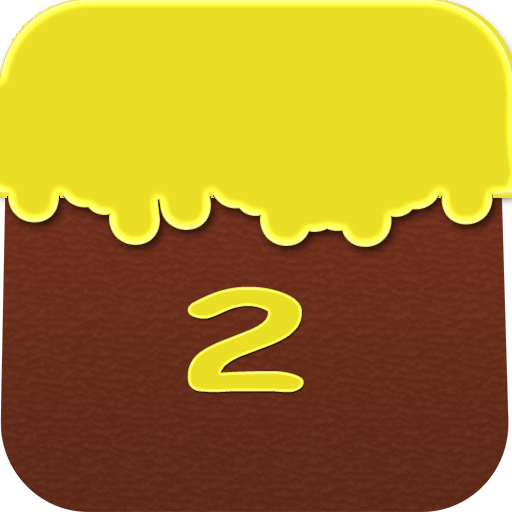
<style>
.page{position:relative;width:512px;height:512px;background:#ebdf26}
.page>*{position:absolute;margin:0}
.t1{font:137.6px "ComicSansMS-Bold";color:#ebdf26;scale:1.67 1}
</style>
<div class="page">
<p class="t1" style="left:188px;top:287px;width:115px;height:105px">2</p>
</div>
